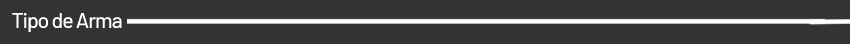
<style>
.page{position:relative;width:850px;height:44px;background:#333333}
.page>*{position:absolute;margin:0}
.t1{font:21.3px "Barlow-Medium";letter-spacing:-0.05em;color:#ffffff}
</style>
<div class="page">
<p class="t1" style="left:12px;top:12px;width:110px;height:20px">Tipo de Arma</p>
</div>
